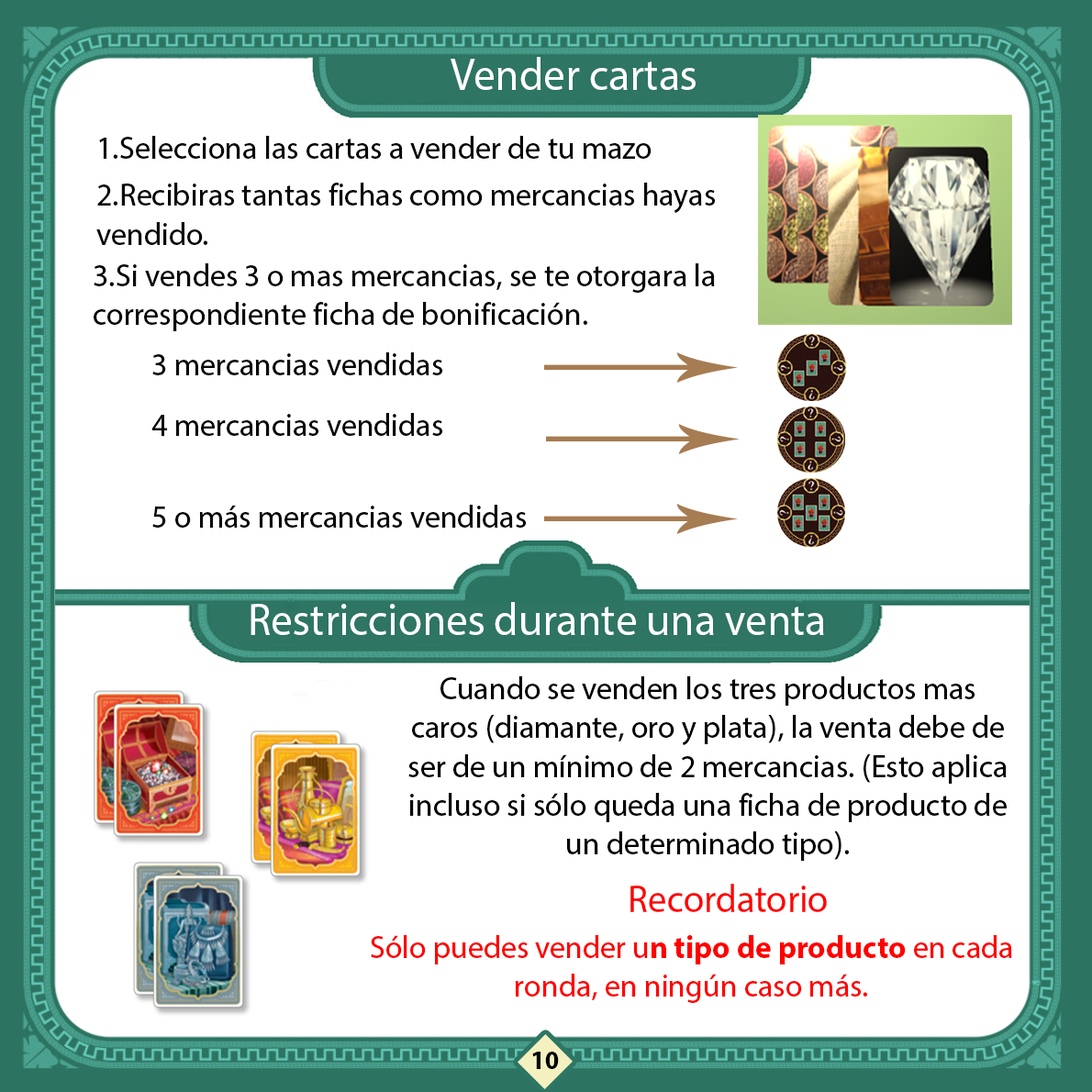
<style>
.page{position:relative;width:1092px;height:1092px;background:#ffffff}
.page>*{position:absolute;margin:0}
.t1{font:45.3px "MyriadHebrew-Regular";color:#ffffff;scale:0.96 1}
.t2{font:32.4px "MyriadHebrew-Regular";color:#070707;scale:0.96 1}
.t3{font:32.4px "MyriadHebrew-Regular";color:#000000;scale:0.96 1}
.t4{font:38.8px "MyriadHebrew-Regular";color:#ff0000;scale:0.96 1}
.t5{font:32.4px "MyriadHebrew-Regular";color:#ff0000;scale:0.96 1}
.t6{font:32.4px "MyriadHebrew-Bold";color:#ff0000;scale:0.96 1}
.t7{font:25.9px "MyriadHebrew-Bold";color:#000000}
</style>
<div class="page">
<p class="t1" style="left:451px;top:57px;width:245px;height:33px">Vender cartas</p>
<p class="t2" style="left:99px;top:136px;width:553px;height:23px">1.Selecciona las cartas a vender de tu mazo</p>
<p class="t2" style="left:96px;top:183px;width:620px;height:62px;text-align:right">2.Recibiras tantas fichas como mercancias hayas vendido.</p>
<p class="t2" style="left:94px;top:263px;width:621px;height:68px;text-align:right">3.Si vendes 3 o mas mercancias, se te otorgara la correspondiente ficha de bonificación.</p>
<p class="t2" style="left:152px;top:352px;width:291px;height:23px">3 mercancias vendidas</p>
<p class="t2" style="left:151px;top:413px;width:292px;height:24px">4 mercancias vendidas</p>
<p class="t2" style="left:152px;top:505px;width:375px;height:23px">5 o más mercancias vendidas</p>
<p class="t1" style="left:251px;top:602px;width:573px;height:33px">Restricciones durante una venta</p>
<p class="t3" style="left:408px;top:676px;width:599px;height:185px;text-align:center">Cuando se venden los tres productos mas caros (diamante, oro y plata), la venta debe de ser de un mínimo de 2 mercancias. (Esto aplica incluso si sólo queda una ficha de producto de un determinado tipo).</p>
<p class="t4" style="left:630px;top:884px;width:197px;height:28px">Recordatorio</p>
<p class="t5" style="left:371px;top:935px;width:641px;height:68px;text-align:center">Sólo puedes vender u<span class="t6">n tipo de producto</span> en cada ronda, en ningún caso más.</p>
<p class="t7" style="left:532px;top:1052px;width:27px;height:17px">10</p>
</div>
